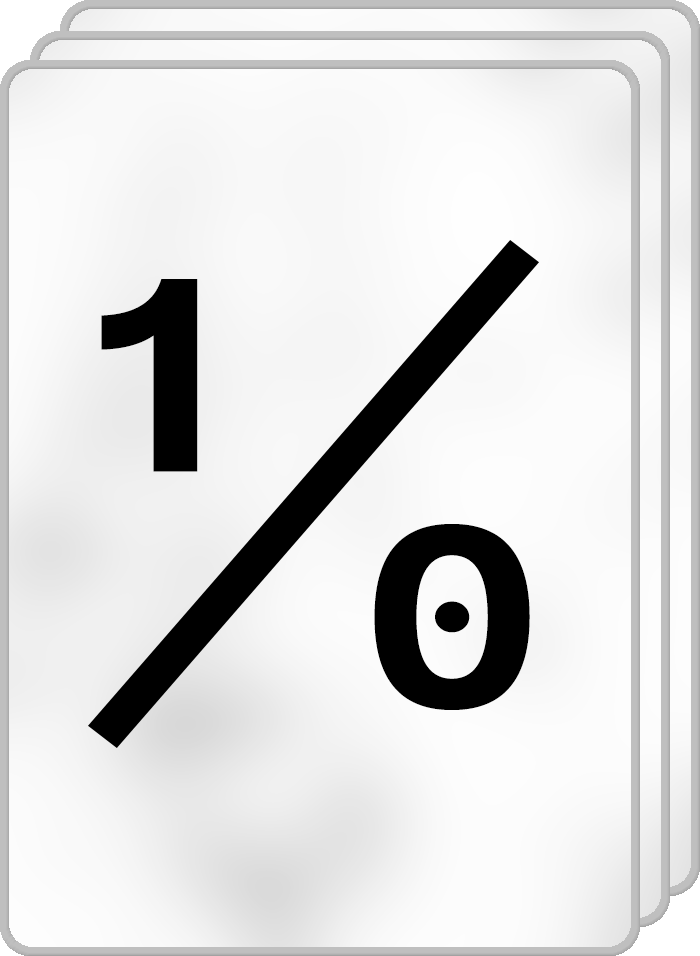
<style>
.page{position:relative;width:700px;height:956px}
.page>*{position:absolute;margin:0}
.t1{font:284.4px "Cadman-Bold";letter-spacing:0.003em;color:#000000;scale:1.11 1}
.t2{font:263.7px "Cadman-Bold";letter-spacing:0.003em;color:#000000;scale:1.11 1}
</style>
<div class="page">
<p class="t1" style="left:101px;top:279px;width:97px;height:193px">1</p>
<p class="t2" style="left:374px;top:524px;width:156px;height:186px">0</p>
</div>
